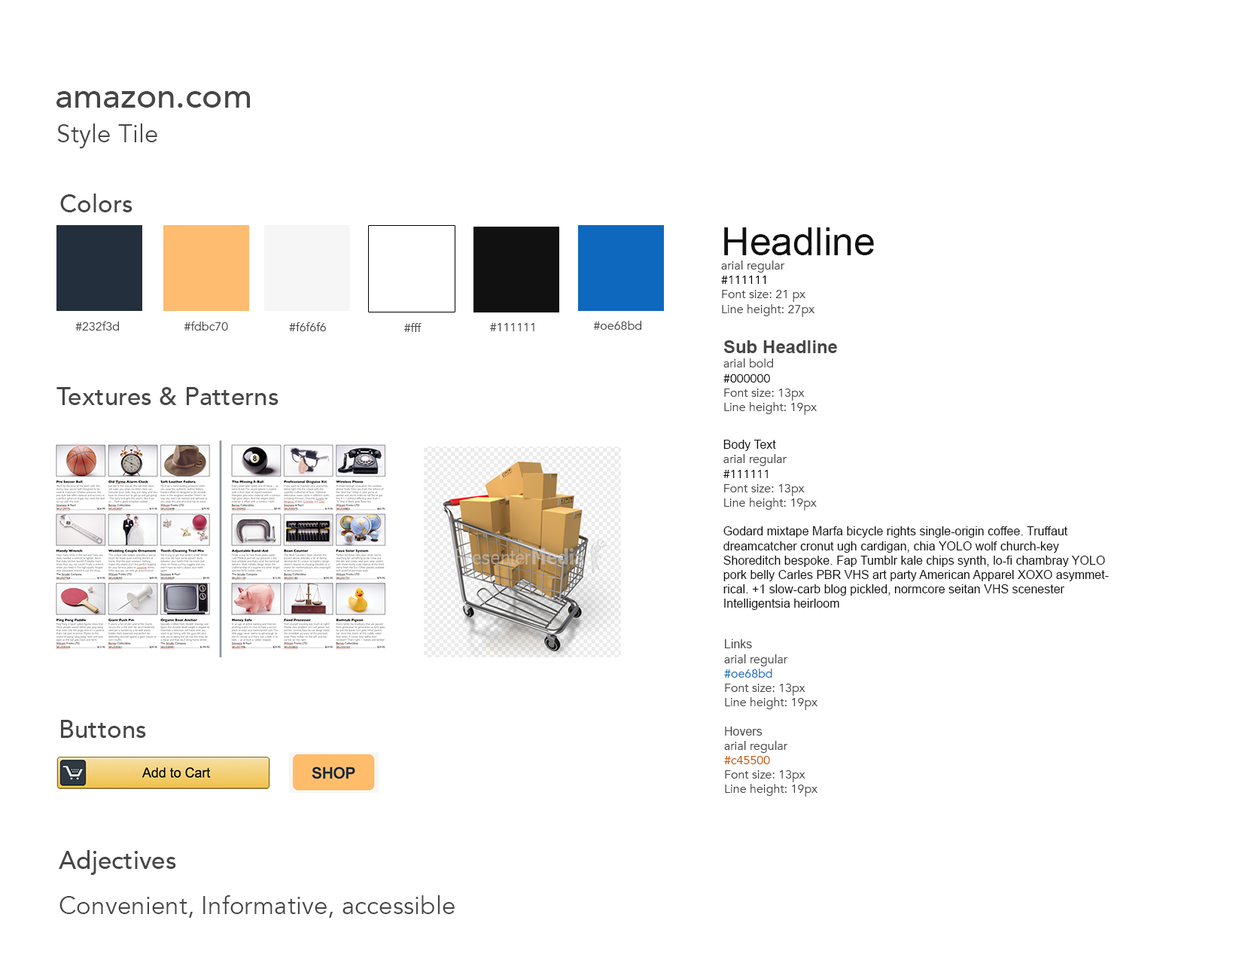
<style>
.page{position:relative;width:1242px;height:960px;background:#ffffff}
.page>*{position:absolute;margin:0}
.t1{font:34.5px "Avenir-Medium";color:#464646}
.t2{font:25.1px "Avenir-Book";color:#464646}
.t3{font:25.1px "Avenir-Medium";color:#464646}
.t4{font:12px "Avenir-Book";color:#464646}
.t5{font:39.1px "ArialMT";color:#111111}
.t6{font:12px "Avenir-Book";color:#000000}
.t7{font:18.1px "Arial-BoldMT";color:#464646}
.t8{font:12px "ArialMT";color:#111111}
.t9{font:12px "Avenir-Book";color:#111111}
.t10{font:12px "ArialMT";color:#464646}
.t11{font:12px "Avenir-Book";color:#0e68bd}
.t12{font:12px "Avenir-Book";color:#c45500}
</style>
<div class="page">
<p class="t1" style="left:56px;top:91px;width:194px;height:17px">amazon.com</p>
<p class="t2" style="left:57px;top:123px;width:100px;height:25px">Style Tile</p>
<p class="t3" style="left:60px;top:193px;width:73px;height:19px">Colors</p>
<p class="t4" style="left:721px;top:227px;width:153px;height:90px"><span class="t5">Headline<br></span>arial regular<br><span class="t6">#111111<br></span>Font size: 21 px<br>Line height: 27px</p>
<p class="t4" style="left:75px;top:321px;width:44px;height:10px">#232f3d</p>
<p class="t4" style="left:184px;top:321px;width:44px;height:10px">#fdbc70</p>
<p class="t4" style="left:289px;top:322px;width:37px;height:9px">#f6f6f6</p>
<p class="t4" style="left:404px;top:323px;width:18px;height:9px">#fff</p>
<p class="t4" style="left:490px;top:323px;width:45px;height:8px">#111111</p>
<p class="t4" style="left:593px;top:321px;width:48px;height:9px">#oe68bd</p>
<p class="t4" style="left:724px;top:340px;width:113px;height:75px"><span class="t7">Sub Headline<br></span>arial bold<br><span class="t6">#000000<br></span>Font size: 13px<br>Line height: 19px</p>
<p class="t3" style="left:56px;top:387px;width:223px;height:18px">Textures &amp; Patterns</p>
<p class="t8" style="left:724px;top:440px;width:385px;height:170px">Body Text<br><span class="t4">arial regular<br></span><span class="t9">#111111<br></span><span class="t4">Font size: 13px<br>Line height: 19px<br><br></span>Godard mixtape Marfa bicycle rights single-origin coffee. Truffaut dreamcatcher cronut ugh cardigan, chia YOLO wolf church-key Shoreditch bespoke. Fap Tumblr kale chips synth, lo-fi chambray YOLO pork belly Carles PBR VHS art party American Apparel XOXO asymmetrical. +1 slow-carb blog pickled, normcore seitan VHS scenester Intelligentsia heirloom</p>
<p class="t4" style="left:724px;top:639px;width:94px;height:158px"><span class="t10">Links <br></span>arial regular<br><span class="t11">#oe68bd<br></span>Font size: 13px<br>Line height: 19px<br><br><span class="t10">Hovers<br></span>arial regular<br><span class="t12">#c45500<br></span>Font size: 13px<br>Line height: 19px</p>
<p class="t3" style="left:61px;top:720px;width:85px;height:18px">Buttons</p>
<p class="t3" style="left:59px;top:850px;width:117px;height:25px">Adjectives</p>
<p class="t2" style="left:59px;top:895px;width:396px;height:23px">Convenient, Informative, accessible</p>
</div>
